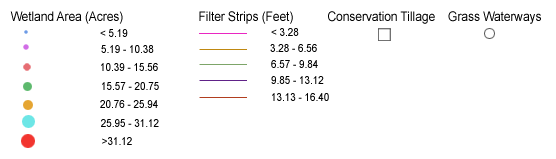
<style>
.page{position:relative;width:556px;height:159px;background:#ffffff}
.page>*{position:absolute;margin:0}
.t1{font:13.2px "ArialMT";letter-spacing:-0.005em;color:#000000;scale:0.91 1}
.t2{font:11px "ArialMT";letter-spacing:-0.005em;color:#000000;scale:0.91 1}
</style>
<div class="page">
<p class="t1" style="left:10px;top:11px;width:113px;height:13px">Wetland Area (Acres)</p>
<p class="t1" style="left:199px;top:11px;width:94px;height:13px">Filter Strips (Feet)</p>
<p class="t1" style="left:328px;top:11px;width:213px;height:13px">Conservation Tillage    Grass Waterways</p>
<p class="t2" style="left:100px;top:29px;width:28px;height:8px">&lt; 5.19</p>
<p class="t2" style="left:271px;top:28px;width:28px;height:8px">&lt; 3.28</p>
<p class="t2" style="left:101px;top:45px;width:53px;height:8px">5.19 - 10.38</p>
<p class="t2" style="left:270px;top:44px;width:47px;height:8px">3.28 - 6.56</p>
<p class="t2" style="left:101px;top:63px;width:57px;height:8px">10.39 - 15.56</p>
<p class="t2" style="left:271px;top:60px;width:47px;height:8px">6.57 - 9.84</p>
<p class="t2" style="left:271px;top:76px;width:53px;height:8px">9.85 - 13.12</p>
<p class="t2" style="left:102px;top:82px;width:57px;height:8px">15.57 - 20.75</p>
<p class="t2" style="left:100px;top:100px;width:58px;height:8px">20.76 - 25.94</p>
<p class="t2" style="left:272px;top:93px;width:57px;height:8px">13.13 - 16.40</p>
<p class="t2" style="left:101px;top:119px;width:58px;height:8px">25.95 - 31.12</p>
<p class="t2" style="left:102px;top:137px;width:30px;height:8px">&gt;31.12</p>
</div>
